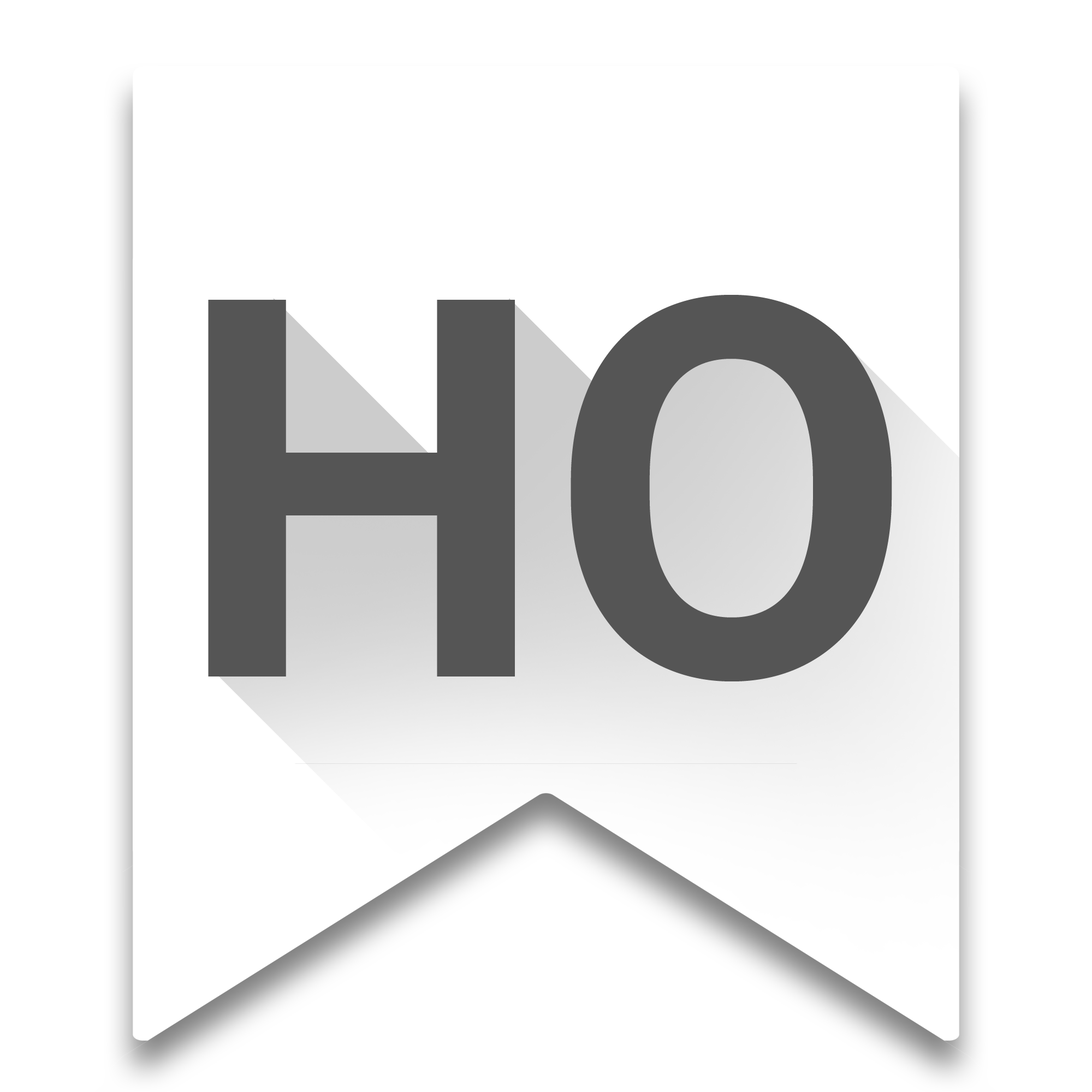
<style>
.page{position:relative;width:1092px;height:1092px;background:#ffffff}
.page>*{position:absolute;margin:0}
.t1{font:529.5px "Roboto-Bold";color:#555555}
</style>
<div class="page">
<p class="t1" style="left:208px;top:295px;width:684px;height:386px">HO</p>
</div>
